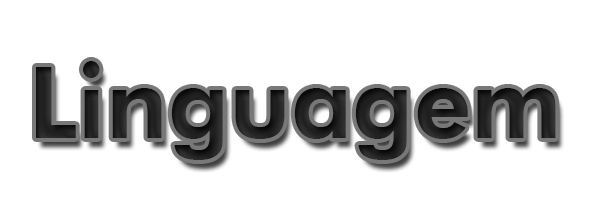
<style>
.page{position:relative;width:600px;height:200px;background:#ffffff}
.page>*{position:absolute;margin:0}
.t1{font:100px "FuturaBT-Heavy";color:#202020}
</style>
<div class="page">
<p class="t1" style="left:36px;top:61px;width:520px;height:99px">Linguagem</p>
</div>
